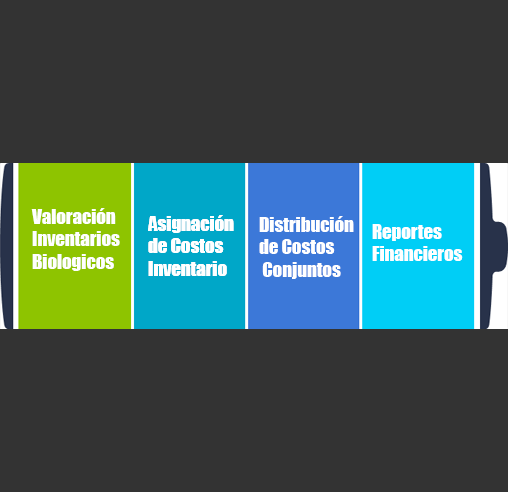
<style>
.page{position:relative;width:508px;height:492px;background:#333333}
.page>*{position:absolute;margin:0}
.t1{font:18.7px "Impact";color:#ffffff}
</style>
<div class="page">
<p class="t1" style="left:31px;top:208px;width:89px;height:63px">Valoración<br>Inventarios<br>Biologicos</p>
<p class="t1" style="left:148px;top:215px;width:86px;height:61px">Asignación <br>de Costos <br>Inventario</p>
<p class="t1" style="left:148px;top:215px;width:86px;height:61px">Asignación <br>de Costos <br>Inventario</p>
<p class="t1" style="left:259px;top:216px;width:95px;height:63px">Distribución <br>de Costos<br> Conjuntos</p>
<p class="t1" style="left:372px;top:224px;width:91px;height:37px">Reportes <br>Financieros</p>
</div>
